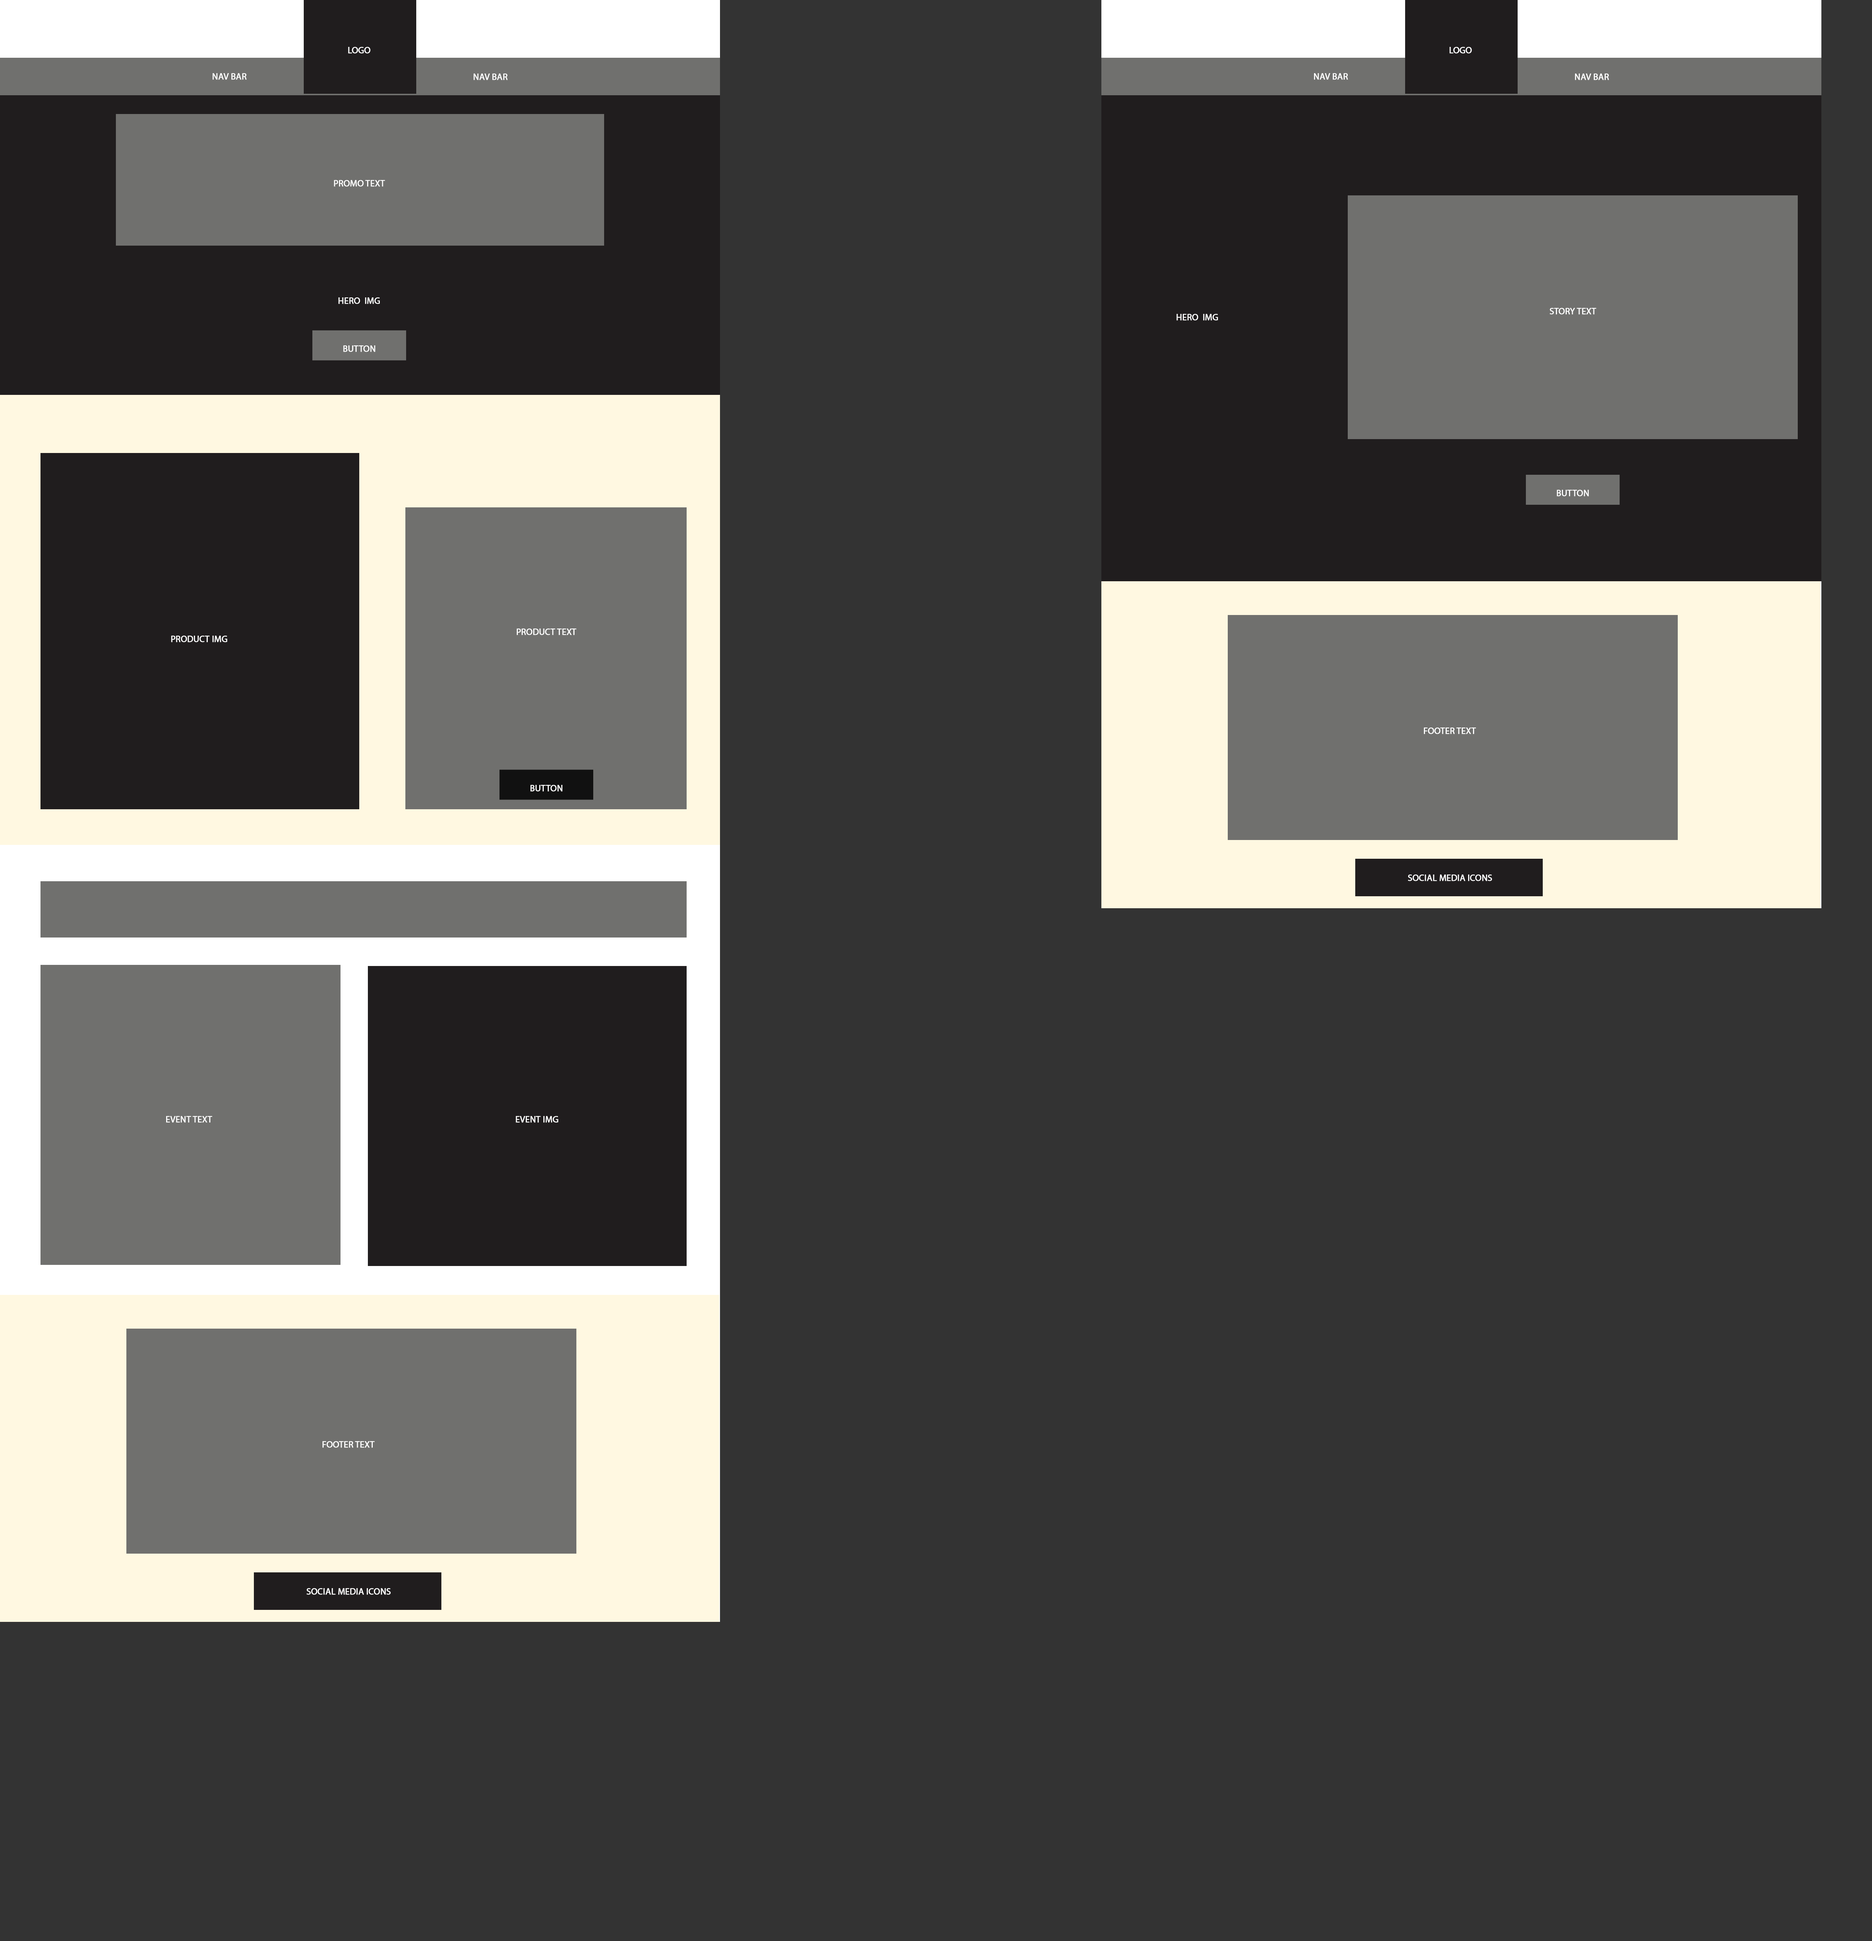
<style>
.page{position:relative;width:1872px;height:1941px;background:#333333}
.page>*{position:absolute;margin:0}
.t1{font:9px "MyriadPro-Regular";letter-spacing:-0.003em;color:#ffffff;font-weight:bold}
.t2{font:9px "MyriadPro-Regular";letter-spacing:-0.003em;color:#fefefe;font-weight:bold}
</style>
<div class="page">
<p class="t1" style="left:348px;top:47px;width:22px;height:7px">LOGO</p>
<p class="t1" style="left:1449px;top:47px;width:23px;height:7px">LOGO</p>
<p class="t2" style="left:213px;top:73px;width:34px;height:7px">NAV BAR</p>
<p class="t2" style="left:474px;top:74px;width:34px;height:6px">NAV BAR</p>
<p class="t2" style="left:1314px;top:73px;width:34px;height:7px">NAV BAR</p>
<p class="t2" style="left:1575px;top:74px;width:34px;height:6px">NAV BAR</p>
<p class="t2" style="left:334px;top:180px;width:51px;height:7px">PROMO TEXT</p>
<p class="t2" style="left:338px;top:297px;width:42px;height:7px">HERO  IMG</p>
<p class="t2" style="left:1176px;top:314px;width:42px;height:7px">HERO  IMG</p>
<p class="t2" style="left:1550px;top:308px;width:46px;height:7px">STORY TEXT</p>
<p class="t2" style="left:343px;top:345px;width:32px;height:7px">BUTTON</p>
<p class="t2" style="left:1557px;top:490px;width:32px;height:6px">BUTTON</p>
<p class="t2" style="left:517px;top:628px;width:59px;height:7px">PRODUCT TEXT</p>
<p class="t2" style="left:171px;top:636px;width:56px;height:6px">PRODUCT IMG</p>
<p class="t1" style="left:1424px;top:728px;width:52px;height:6px">FOOTER TEXT</p>
<p class="t2" style="left:530px;top:785px;width:32px;height:7px">BUTTON</p>
<p class="t1" style="left:1408px;top:874px;width:84px;height:7px">SOCIAL MEDIA ICONS</p>
<p class="t2" style="left:166px;top:1116px;width:46px;height:7px">EVENT TEXT</p>
<p class="t2" style="left:516px;top:1116px;width:42px;height:7px">EVENT IMG</p>
<p class="t1" style="left:322px;top:1441px;width:53px;height:7px">FOOTER TEXT</p>
<p class="t1" style="left:306px;top:1588px;width:85px;height:7px">SOCIAL MEDIA ICONS</p>
</div>
